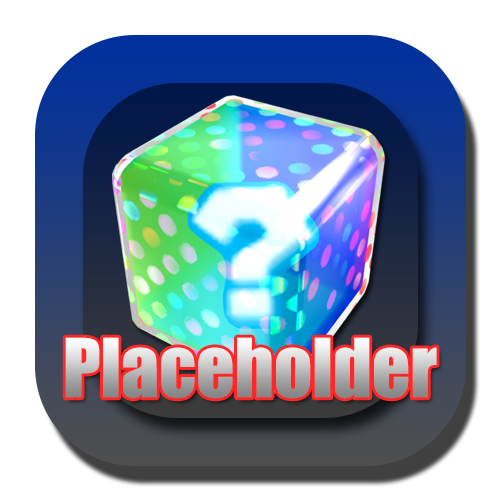
<style>
.page{position:relative;width:500px;height:500px;background:#ffffff}
.page>*{position:absolute;margin:0}
.t1{font:75.1px "Impact"}
</style>
<div class="page">
<p class="t1" style="left:65px;top:337px;width:372px;height:62px">Placeholder</p>
</div>
